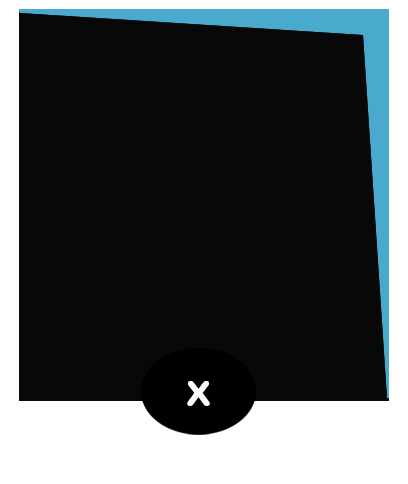
<style>
.page{position:relative;width:408px;height:484px;background:#080808}
.page>*{position:absolute;margin:0}
.t1{font:48px "ArialRoundedMTBold";color:#ffffff}
</style>
<div class="page">
<p class="t1" style="left:187px;top:381px;width:23px;height:25px">x</p>
</div>
